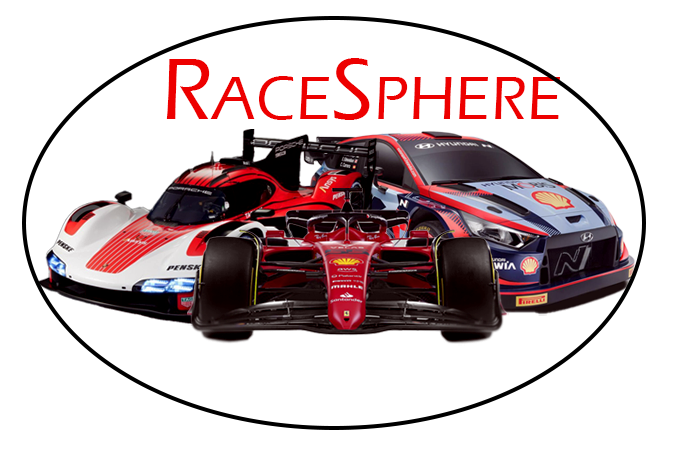
<style>
.page{position:relative;width:675px;height:457px;background:#ffffff}
.page>*{position:absolute;margin:0}
.t1{font:90.4px "ErasITC-Medium";color:#ed0000;font-variant:small-caps}
</style>
<div class="page">
<p class="t1" style="left:166px;top:58px;width:394px;height:62px">RaceSphere</p>
</div>
